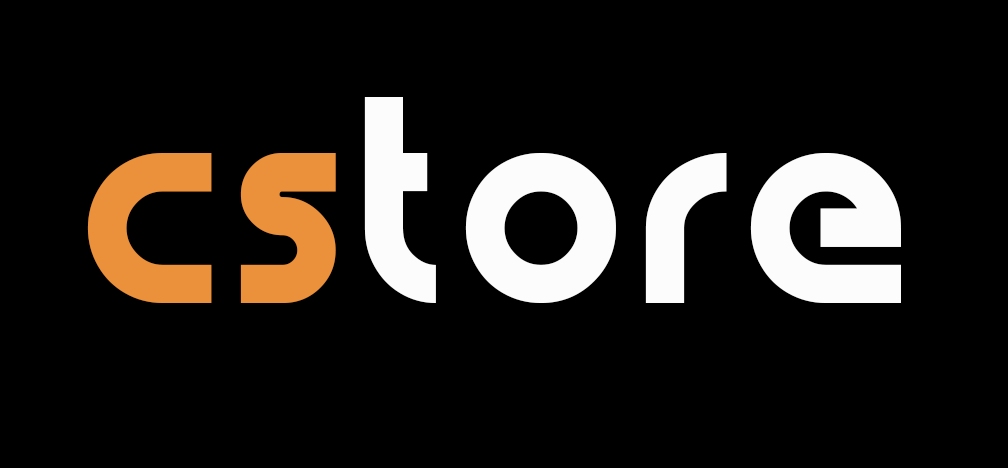
<style>
.page{position:relative;width:1008px;height:468px;background:#000000}
.page>*{position:absolute;margin:0}
.t1{font:300px "WerkHaus-Bold";color:#fcfcfc}
.t2{font:300px "WerkHaus-Bold";color:#ec913b}
</style>
<div class="page">
<p class="t1" style="left:87px;top:97px;width:814px;height:206px"><span class="t2">cs</span>tore</p>
</div>
